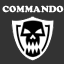
<style>
.page{position:relative;width:64px;height:64px;background:#333333}
.page>*{position:absolute;margin:0}
.t1{font:9px "CooperBlackStd";color:#ffffff}
</style>
<div class="page">
<p class="t1" style="left:2px;top:5px;width:62px;height:8px">COMMANDO</p>
</div>
